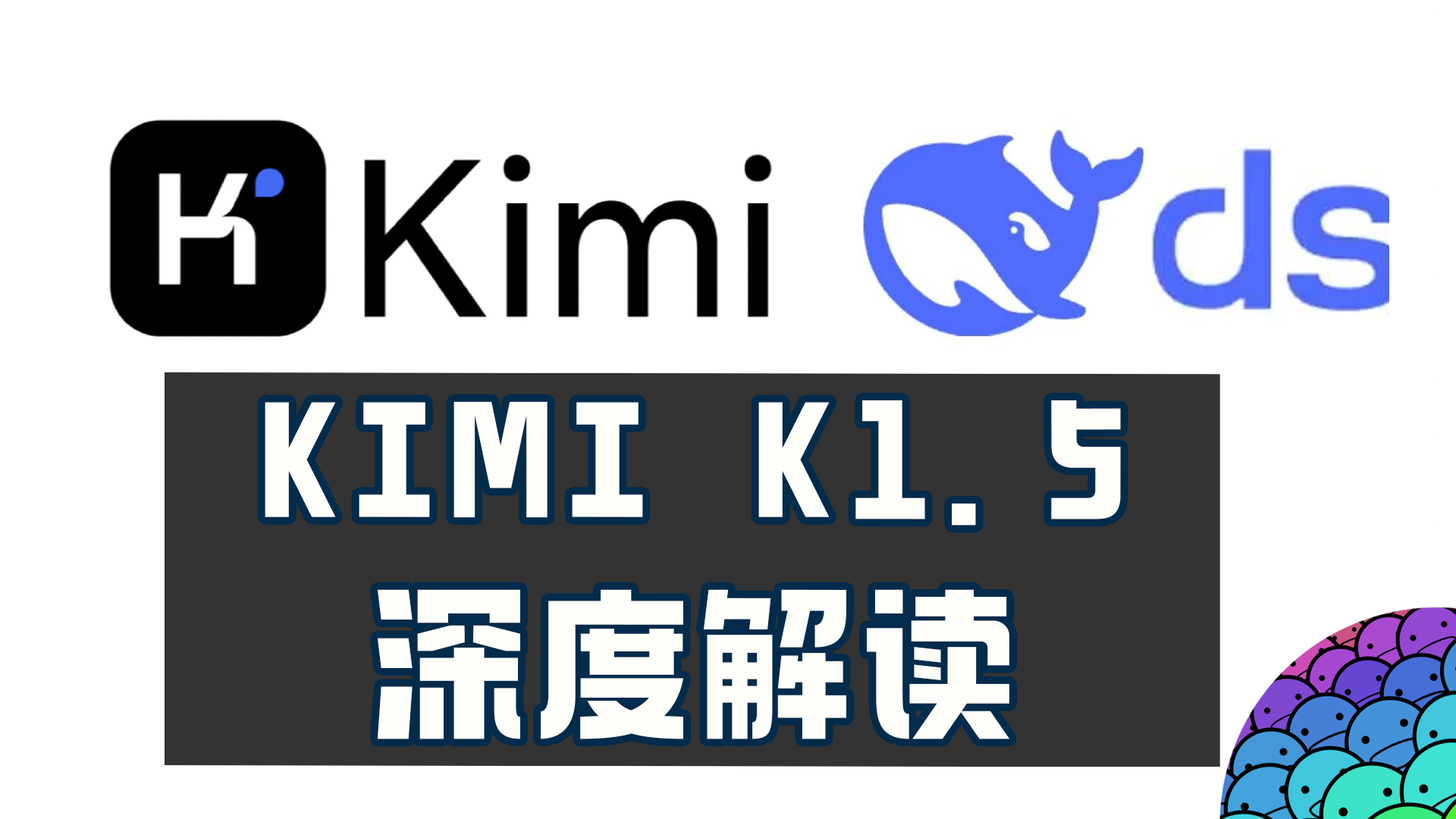
<style>
.page{position:relative;width:1456px;height:819px;background:#ffffff}
.page>*{position:absolute;margin:0}
.t1{font:166.8px/204.7px "098-";letter-spacing:0.05em;color:#fefffa}
</style>
<div class="page">
<p class="t1" style="left:265px;top:400px;width:856px;height:339px;text-align:center">KIMI K1.5<br>深度解读</p>
</div>
